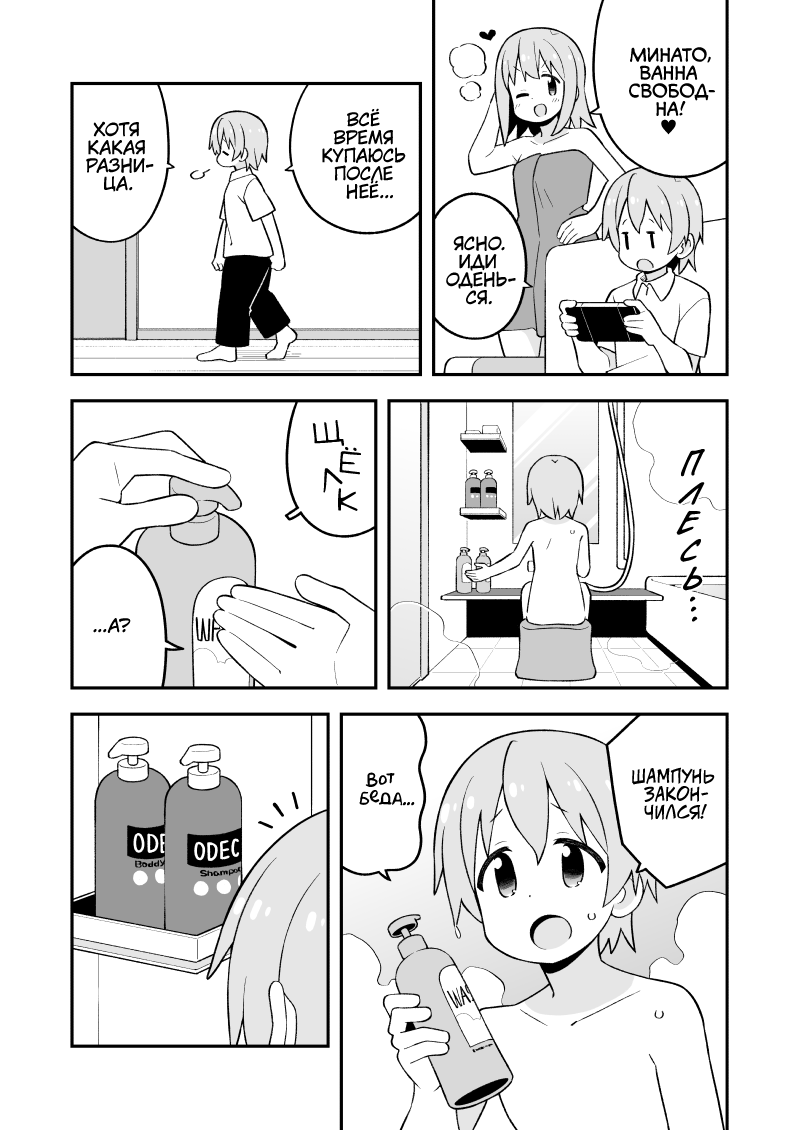
<style>
.page{position:relative;width:800px;height:1130px;background:#ffffff}
.page>*{position:absolute;margin:0}
.t1{font:18px "v_CCMonologous";color:#000000;text-transform:uppercase}
.t2{font:18px "KozGoPr6N-Regular";color:#000000;text-transform:uppercase}
.t3{font:18px "KuraiVoice2";color:#000000;text-transform:uppercase}
.t4{font:30px "v_Augie";color:#000000;text-transform:uppercase}
.t5{font:30px "v_CCDearDiary";color:#000000;text-transform:uppercase}
.t6{font:18px "AkbarPlain";color:#000000}
.t7{font:18px "v_CCJeffCampbell";color:#000000;text-transform:uppercase}
</style>
<div class="page">
<p class="t1" style="left:629px;top:47px;width:86px;height:88px;text-align:center">Минато,<br>ванна<br>свобод-<br>на!<br><span class="t2">♥</span></p>
<p class="t3" style="left:322px;top:108px;width:84px;height:91px;text-align:center">всё<br>время<br>купаюсь<br>после<br>неё...</p>
<p class="t3" style="left:86px;top:121px;width:68px;height:71px;text-align:center">Хотя<br>какая<br>разни-<br>ца.</p>
<p class="t3" style="left:446px;top:236px;width:70px;height:69px;text-align:center">Ясно.<br>Иди<br>одень-<br>ся.</p>
<p class="t4" style="left:312px;top:420px;width:32px;height:26px;rotate:-7deg">щ</p>
<p class="t4" style="left:339px;top:447px;width:22px;height:28px;rotate:5deg">ё</p>
<p class="t5" style="left:681px;top:449px;width:24px;height:28px;rotate:2deg">п</p>
<p class="t4" style="left:323px;top:468px;width:20px;height:25px;rotate:-16deg">л</p>
<p class="t5" style="left:678px;top:482px;width:27px;height:23px;rotate:14deg">л</p>
<p class="t4" style="left:338px;top:488px;width:20px;height:23px">к</p>
<p class="t5" style="left:676px;top:510px;width:25px;height:25px;rotate:8deg">е</p>
<p class="t5" style="left:680px;top:539px;width:21px;height:23px;rotate:8deg">с</p>
<p class="t5" style="left:683px;top:566px;width:20px;height:25px;rotate:6deg">ь</p>
<p class="t5" style="left:690px;top:596px;width:6px;height:6px">.</p>
<p class="t5" style="left:691px;top:606px;width:6px;height:6px">.</p>
<p class="t5" style="left:692px;top:616px;width:6px;height:6px">.</p>
<p class="t3" style="left:93px;top:618px;width:38px;height:15px">...А?</p>
<p class="t6" style="left:359px;top:772px;width:56px;height:34px;text-align:center">Вот<br>беда...</p>
<p class="t7" style="left:632px;top:767px;width:83px;height:53px;text-align:center">Шампунь<br>закон-<br>чился!</p>
</div>
